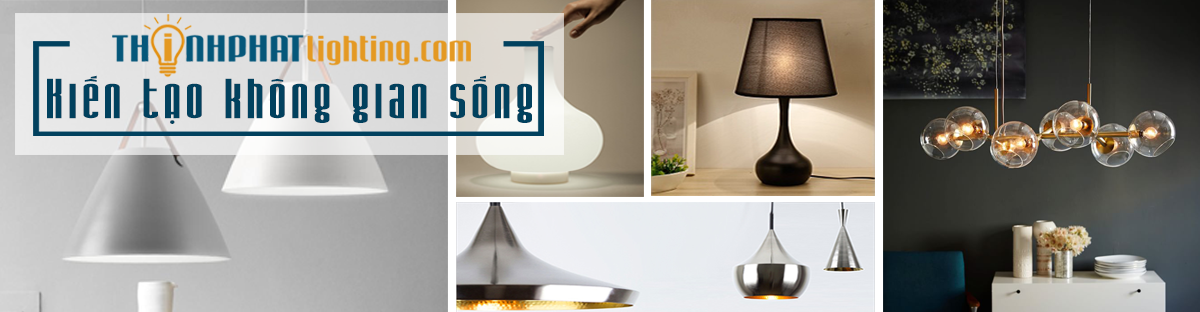
<style>
.page{position:relative;width:1200px;height:312px}
.page>*{position:absolute;margin:0}
.t1{font:48.9px "UTM-Iron-Gothic";letter-spacing:0.1em;color:#01415e;scale:1.18 1}
</style>
<div class="page">
<p class="t1" style="left:47px;top:75px;width:485px;height:49px">Kiến tạo không gian sống</p>
</div>
